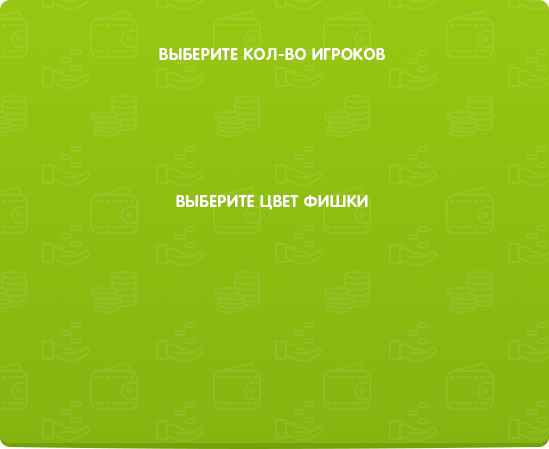
<style>
.page{position:relative;width:549px;height:449px}
.page>*{position:absolute;margin:0}
.t1{font:16px "RotondaC-Bold";letter-spacing:0.04em;color:#ffffff;text-transform:uppercase}
</style>
<div class="page">
<p class="t1" style="left:159px;top:48px;width:226px;height:12px">Выберите кол-во игроков</p>
<p class="t1" style="left:176px;top:195px;width:192px;height:15px">Выберите цвет фишки</p>
</div>
